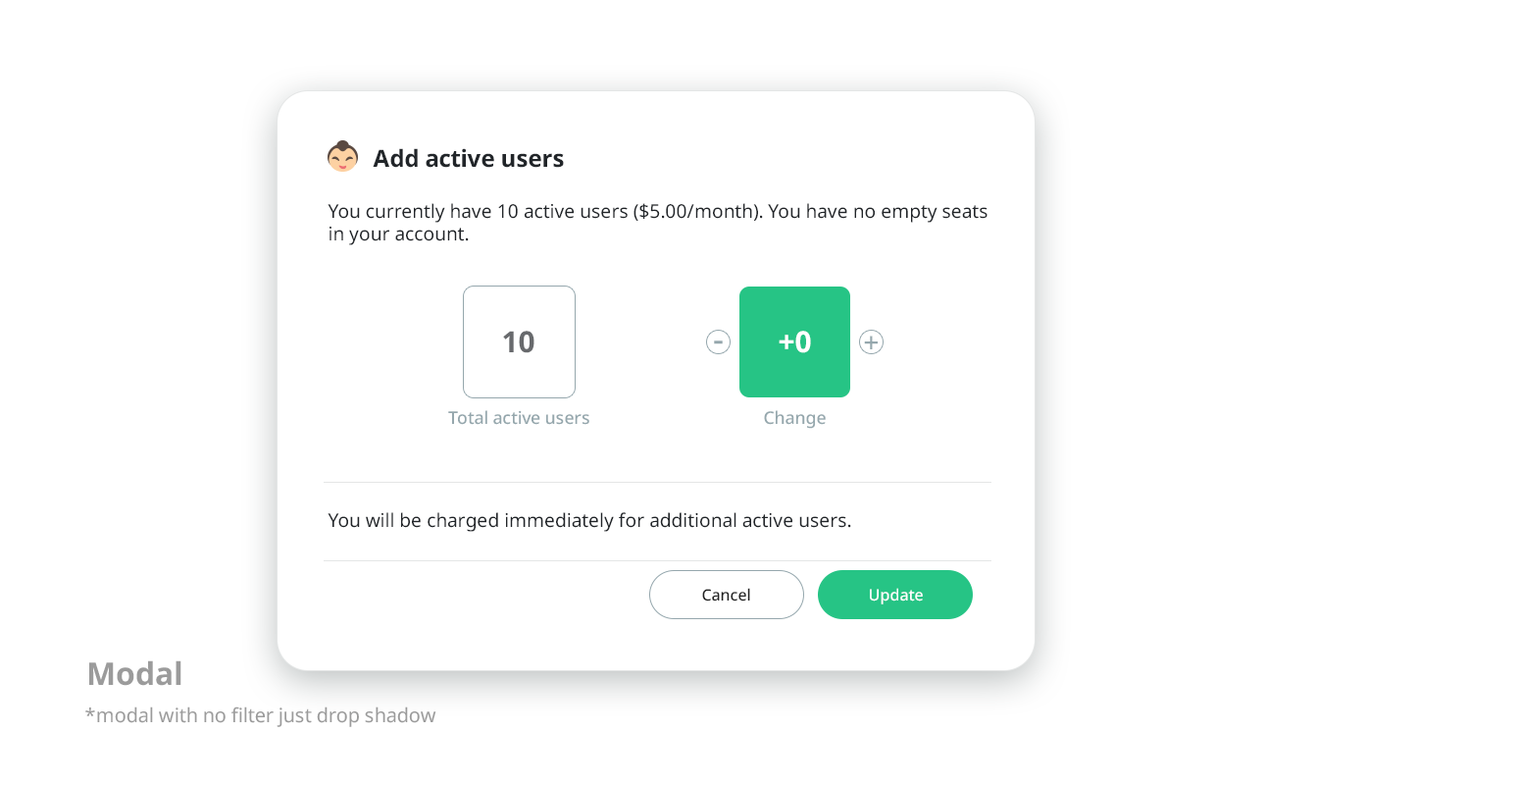
<style>
.page{position:relative;width:1520px;height:785px;background:#ffffff}
.page>*{position:absolute;margin:0}
.t1{font:23.5px "NotoSans-Bold";color:#212529}
.t2{font:18.8px "NotoSans-Regular";color:#212529}
.t3{font:29.3px "NotoSans-Bold";color:#686a6d}
.t4{font:33.7px "NotoSans-Medium";color:#95a7ad}
.t5{font:29.3px "NotoSans-Bold";color:#ffffff}
.t6{font:27.2px "NotoSans-Medium";color:#95a7ad}
.t7{font:17.4px "NotoSans-Medium";color:#95a7ad}
.t8{font:15.7px "NotoSans-Medium";color:#222222}
.t9{font:15.7px "NotoSans-Medium";color:#ffffff}
.t10{font:31.4px "NotoSans-Bold";color:#9b9b9b}
.t11{font:19.6px "NotoSans";color:#9b9b9b}
</style>
<div class="page">
<p class="t1" style="left:373px;top:148px;width:191px;height:20px">Add active users</p>
<p class="t2" style="left:328px;top:203px;width:659px;height:42px">You currently have 10 active users ($5.00/month). You have no empty seats<br>in your account.</p>
<p class="t3" style="left:503px;top:330px;width:31px;height:23px">10</p>
<p class="t4" style="left:714px;top:340px;width:9px;height:4px">-</p>
<p class="t5" style="left:779px;top:330px;width:32px;height:23px">+0</p>
<p class="t6" style="left:864px;top:335px;width:14px;height:14px">+</p>
<p class="t7" style="left:448px;top:410px;width:141px;height:15px">Total active users</p>
<p class="t7" style="left:764px;top:410px;width:62px;height:19px">Change</p>
<p class="t2" style="left:328px;top:512px;width:523px;height:20px">You will be charged immediately for additional active users.</p>
<p class="t8" style="left:702px;top:587px;width:48px;height:14px">Cancel</p>
<p class="t9" style="left:870px;top:587px;width:53px;height:17px">Update</p>
<p class="t10" style="left:89px;top:660px;width:92px;height:25px">Modal</p>
<p class="t11" style="left:85px;top:706px;width:351px;height:21px">*modal with no filter just drop shadow</p>
</div>
